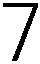
<style>
.page{position:relative;width:40px;height:64px;background:#ffffff}
.page>*{position:absolute;margin:0}
.t1{font:74px "OPPOSans-R";color:#000000}
</style>
<div class="page">
<p class="t1" style="left:3px;top:3px;width:35px;height:58px">7</p>
</div>
